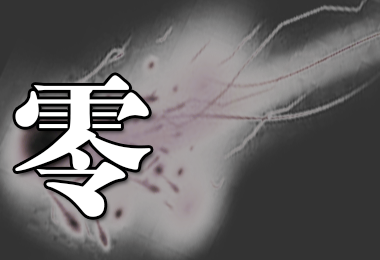
<style>
.page{position:relative;width:380px;height:260px;background:#333333}
.page>*{position:absolute;margin:0}
.t1{font:150px "HYa9gj";color:#ffffff}
</style>
<div class="page">
<p class="t1" style="left:15px;top:75px;width:136px;height:142px">零</p>
</div>
